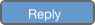
<style>
.page{position:relative;width:95px;height:25px;background:#6699cc}
.page>*{position:absolute;margin:0}
.t1{font:13px "HelveticaNeue";color:#ffffff}
</style>
<div class="page">
<p class="t1" style="left:29px;top:9px;width:32px;height:13px">Reply</p>
</div>
